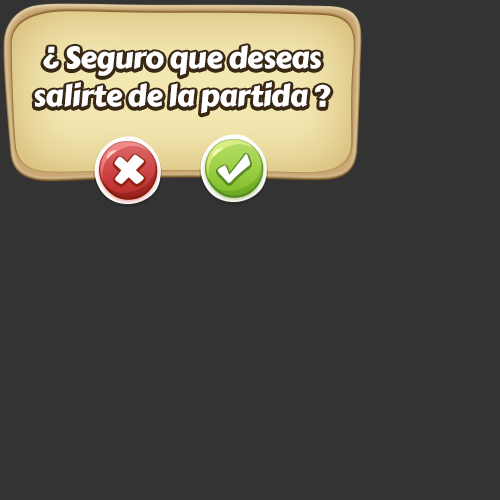
<style>
.page{position:relative;width:500px;height:500px;background:#333333}
.page>*{position:absolute;margin:0}
.t1{font:30px/38px "CarterOne";letter-spacing:-0.02em;color:#ffffff}
</style>
<div class="page">
<p class="t1" style="left:34px;top:45px;width:297px;height:69px;text-align:center">¿ Seguro que deseas<br>salirte de la partida ?</p>
</div>
